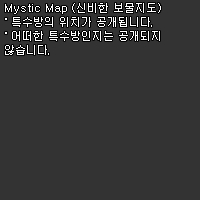
<style>
.page{position:relative;width:200px;height:200px;background:#333333}
.page>*{position:absolute;margin:0}
.t1{font:11px/14px "Dotum";color:#ffffff}
</style>
<div class="page">
<p class="t1" style="left:5px;top:3px;width:156px;height:52px">Mystic Map (신비한 보물지도)<br>˚ 특수방의 위치가 공개됩니다.<br>˚ 어떠한 특수방인지는 공개되지<br>않습니다.</p>
</div>
